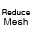
<style>
.page{position:relative;width:32px;height:32px;background:#ffffff}
.page>*{position:absolute;margin:0}
.t1{font:8px "Gulim";color:#000000}
.t2{font:10px "Gulim";color:#000000}
</style>
<div class="page">
<p class="t1" style="left:2px;top:9px;width:28px;height:6px">Reduce</p>
<p class="t2" style="left:4px;top:18px;width:24px;height:7px">Mesh</p>
</div>
